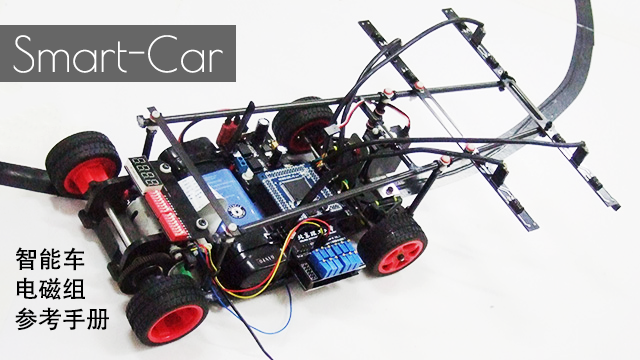
<style>
.page{position:relative;width:640px;height:360px}
.page>*{position:absolute;margin:0}
.t1{font:48px "PoiretOne-Regular";color:#ffffff}
.t2{font:24px/30px "AdobeHeitiStd-Regular";color:#000000}
</style>
<div class="page">
<p class="t1" style="left:13px;top:35px;width:210px;height:38px">Smart-Car</p>
<p class="t2" style="left:15px;top:247px;width:94px;height:84px">智能车<br>电磁组<br>参考手册</p>
</div>
